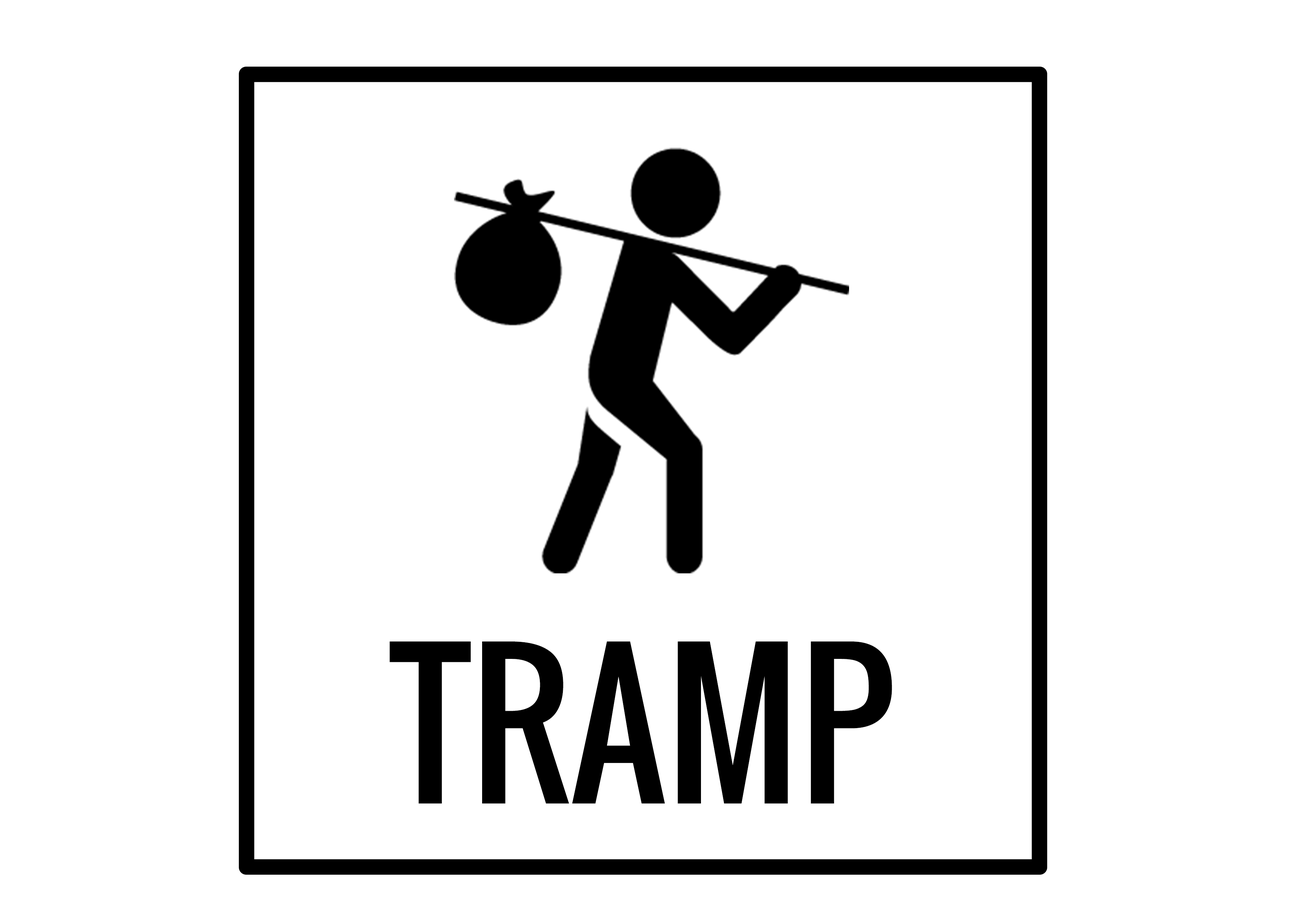
<style>
.page{position:relative;width:1299px;height:918px;background:#ffffff}
.page>*{position:absolute;margin:0}
.t1{font:185.1px "Oswald-Regular";color:#000000;text-transform:uppercase}
</style>
<div class="page">
<p class="t1" style="left:389px;top:642px;width:503px;height:162px">TRAMP</p>
</div>
